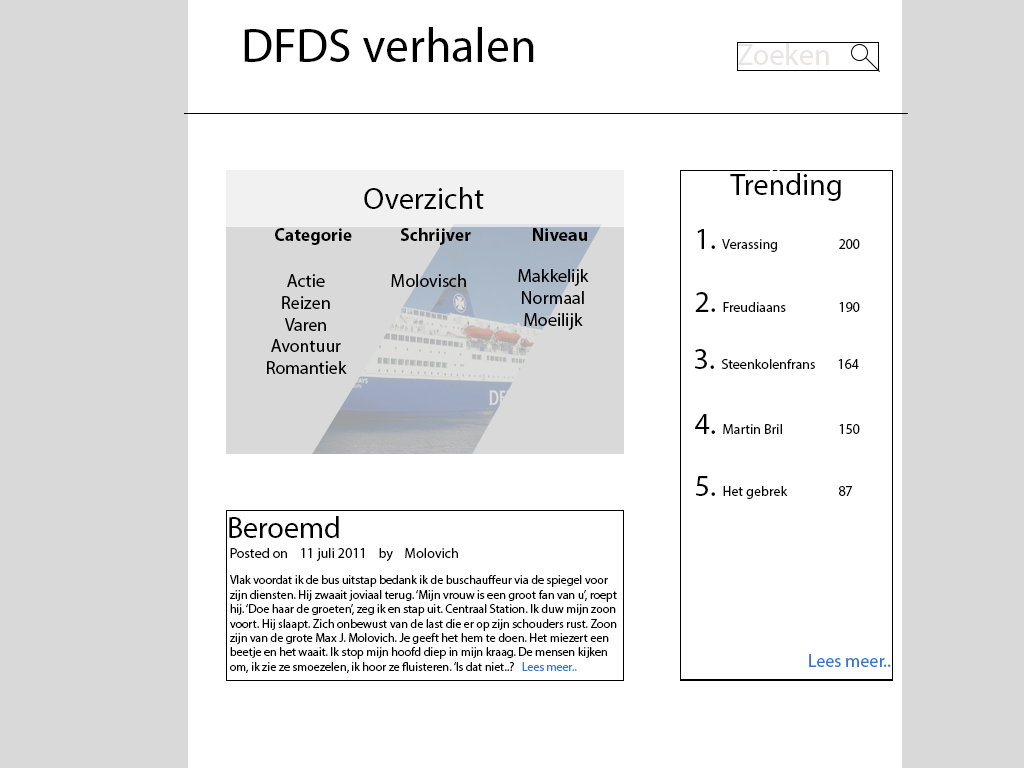
<style>
.page{position:relative;width:1024px;height:768px;background:#ffffff}
.page>*{position:absolute;margin:0}
.t1{font:48px "MyriadPro-Regular";color:#000000}
.t2{font:30px "MyriadPro-Regular";color:#e7e4e4}
.t3{font:30px "MyriadPro-Regular";color:#000000}
.t4{font:14px "MyriadPro-Regular";color:#000000}
.t5{font:18px "MyriadPro-Bold";color:#000000}
.t6{font:18px "MyriadPro-Regular";color:#000000}
.t7{font:12px "MyriadPro-Regular";color:#000000}
.t8{font:12px "MyriadPro-Regular";color:#3877ce}
.t9{font:18px "MyriadPro-Regular";color:#3877ce}
</style>
<div class="page">
<p class="t1" style="left:244px;top:27px;width:290px;height:35px">DFDS verhalen</p>
<p class="t2" style="left:738px;top:43px;width:91px;height:22px">Zoeken</p>
<p class="t3" style="left:730px;top:173px;width:111px;height:28px">Trending</p>
<p class="t3" style="left:364px;top:187px;width:120px;height:22px"><span class="t4"><br></span>Overzicht</p>
<p class="t5" style="left:275px;top:228px;width:77px;height:17px">Categorie</p>
<p class="t5" style="left:400px;top:228px;width:71px;height:17px">Schrijver</p>
<p class="t5" style="left:533px;top:228px;width:54px;height:13px">Niveau</p>
<p class="t4" style="left:697px;top:229px;width:163px;height:23px"><span class="t3">1. </span>Verassing  200</p>
<p class="t6" style="left:518px;top:269px;width:71px;height:61px;text-align:center">Makkelijk<br>Normaal<br>Moeilijk</p>
<p class="t6" style="left:267px;top:274px;width:80px;height:100px;text-align:center">Actie<br>Reizen<br>Varen<br>Avontuur<br>Romantiek</p>
<p class="t6" style="left:391px;top:274px;width:75px;height:13px">Molovisch</p>
<p class="t4" style="left:695px;top:292px;width:165px;height:20px"><span class="t3">2. </span>Freudiaans  190</p>
<p class="t4" style="left:694px;top:349px;width:165px;height:20px"><span class="t3">3. </span>Steenkolenfrans 164</p>
<p class="t4" style="left:695px;top:414px;width:165px;height:20px"><span class="t3">4. </span>Martin Bril  150</p>
<p class="t4" style="left:695px;top:476px;width:157px;height:23px"><span class="t3">5. </span>Het gebrek  87</p>
<p class="t3" style="left:229px;top:516px;width:110px;height:22px">Beroemd</p>
<p class="t4" style="left:230px;top:548px;width:228px;height:14px">Posted on    11 juli 2011    by    Molovich</p>
<p class="t7" style="left:230px;top:575px;width:387px;height:98px">Vlak voordat ik de bus uitstap bedank ik de buschauffeur via de spiegel voor zijn diensten. Hij zwaait joviaal terug. ‘Mijn vrouw is een groot fan van u’, roept hij. ‘Doe haar de groeten’, zeg ik en stap uit. Centraal Station. Ik duw mijn zoon voort. Hij slaapt. Zich onbewust van de last die er op zijn schouders rust. Zoon zijn van de grote Max J. Molovich. Je geeft het hem te doen. Het miezert een beetje en het waait. Ik stop mijn hoofd diep in mijn kraag. De mensen kijken om, ik zie ze smoezelen, ik hoor ze fluisteren. ‘Is dat niet..?   <span class="t8">Lees meer..</span></p>
<p class="t9" style="left:809px;top:654px;width:82px;height:13px">Lees meer..</p>
</div>
